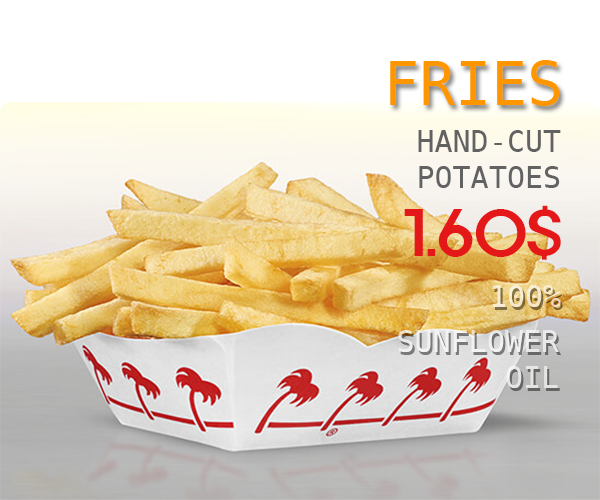
<style>
.page{position:relative;width:600px;height:500px}
.page>*{position:absolute;margin:0}
.t1{font:60px "DejaVuSansMono";color:#ff9600}
.t2{font:30px "DejaVuSansMono";color:#626262}
.t3{font:60px "ExpoM-HM";color:#e41818}
.t4{font:30px "DejaVuSansMono";color:#f7ebd0}
.t5{font:30px "DejaVuSansMono";color:#ffffff}
</style>
<div class="page">
<p class="t1" style="left:390px;top:60px;width:170px;height:46px">FRIES</p>
<p class="t2" style="left:418px;top:130px;width:143px;height:58px;text-align:right">HAND-CUT<br>POTATOES</p>
<p class="t3" style="left:404px;top:205px;width:157px;height:55px">1.60$</p>
<p class="t4" style="left:492px;top:285px;width:69px;height:22px">100%</p>
<p class="t5" style="left:398px;top:330px;width:161px;height:58px;text-align:right;opacity:0.6">SUNFLOWER<br>OIL</p>
</div>
